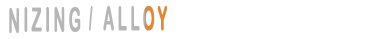
<style>
.page{position:relative;width:388px;height:39px;background:#ffffff}
.page>*{position:absolute;margin:0}
.t1{font:33px "ArialRoundedMTBold";color:#b5b5b5;font-weight:bold;scale:0.33 1}
.t2{font:33px "ArialRoundedMTBold";letter-spacing:0.2em;font-weight:bold;scale:0.47 1}
.t3{font:33px "ArialRoundedMTBold";letter-spacing:0.2em;color:#b6b6b6;font-weight:bold;scale:0.47 1}
</style>
<div class="page">
<p class="t1" style="left:89px;top:6px;width:4px;height:25px">/</p>
<p class="t2" style="left:103px;top:6px;width:64px;height:25px">ALLOY</p>
<p class="t3" style="left:9px;top:7px;width:72px;height:26px">NIZING</p>
</div>
